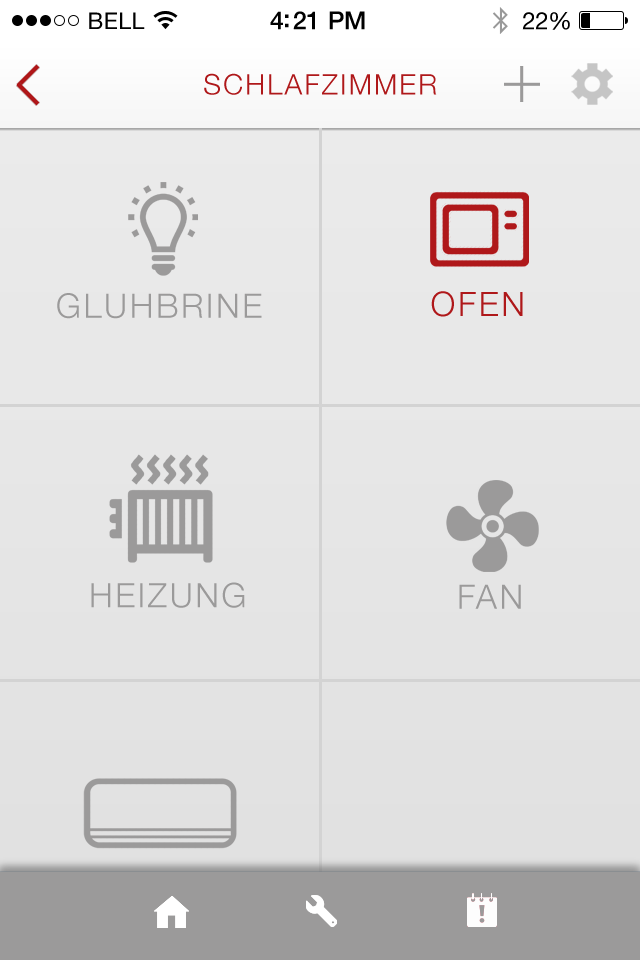
<style>
.page{position:relative;width:640px;height:960px}
.page>*{position:absolute;margin:0}
.t1{font:23px "HelveticaNeue";letter-spacing:0.02em;color:#000000}
.t2{font:25px "HelveticaNeue-Medium";letter-spacing:-0.02em;color:#000000}
.t3{font:24px "HelveticaNeue";letter-spacing:-0.02em;color:#000000}
.t4{font:28.4px "HelveticaNeue-Light";letter-spacing:0.08em;color:#af181a}
.t5{font:33.8px "HelveticaNeue-Light";letter-spacing:0.08em;color:#9b9a9a}
.t6{font:33.8px "HelveticaNeue-Light";letter-spacing:0.08em;color:#af181a}
</style>
<div class="page">
<p class="t1" style="left:89px;top:12px;width:56px;height:17px">BELL</p>
<p class="t2" style="left:270px;top:11px;width:95px;height:19px">4:21 PM</p>
<p class="t3" style="left:522px;top:11px;width:48px;height:19px">22%</p>
<p class="t4" style="left:204px;top:73px;width:233px;height:22px">SCHLAFZIMMER</p>
<p class="t5" style="left:57px;top:293px;width:205px;height:26px">GLUHBRINE</p>
<p class="t6" style="left:431px;top:291px;width:92px;height:26px">OFEN</p>
<p class="t5" style="left:91px;top:582px;width:154px;height:26px">HEIZUNG</p>
<p class="t5" style="left:459px;top:584px;width:62px;height:25px">FAN</p>
</div>
